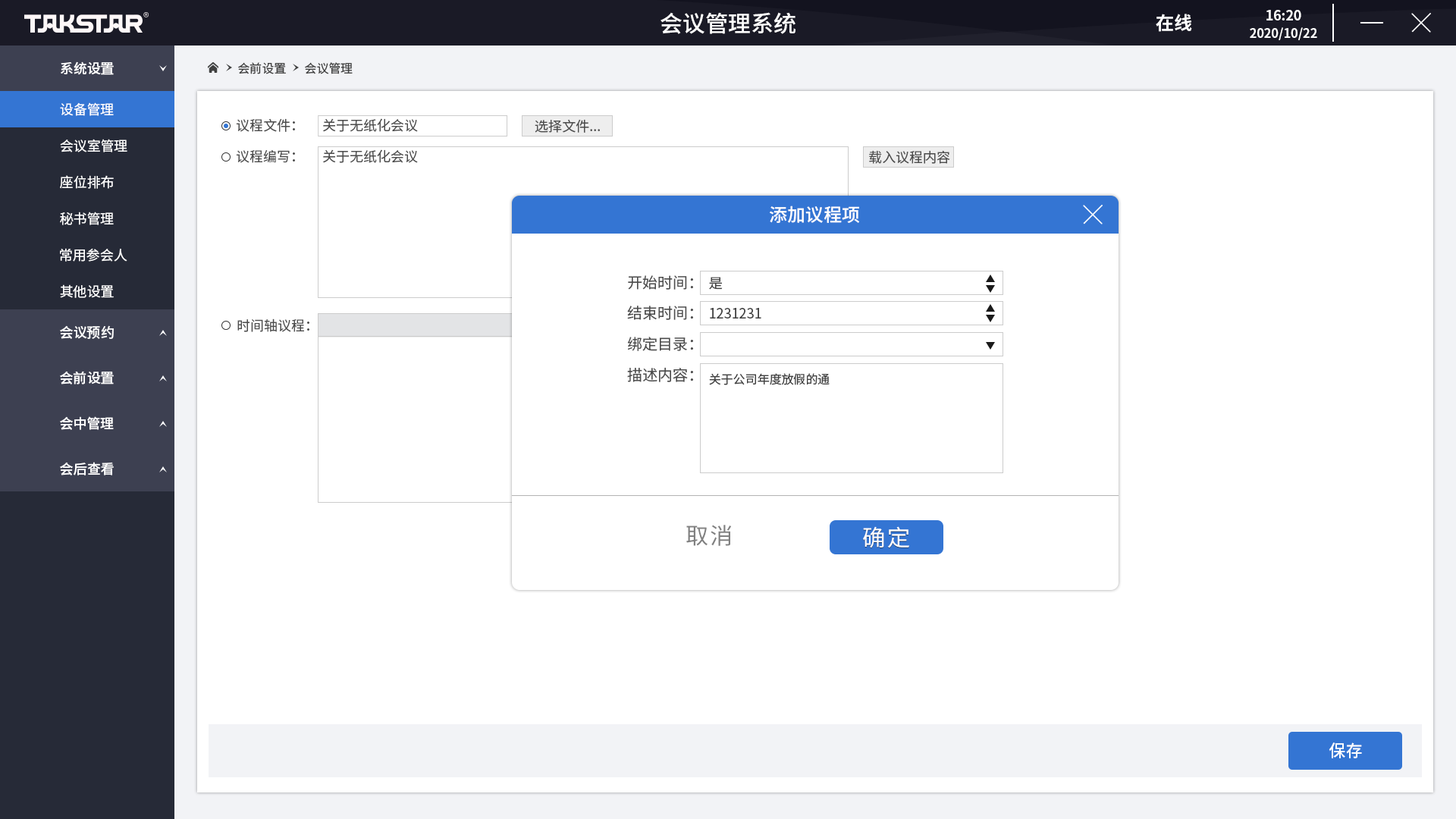
<style>
.page{position:relative;width:1456px;height:819px;background:#ffffff}
.page>*{position:absolute;margin:0}
.t1{font:22.7px "SourceHanSansCN-Medium";color:#ffffff}
.t2{font:18.2px "SourceHanSansCN-Bold";color:#ffffff}
.t3{font:12.6px/17.2px "SourceHanSansCN-Bold";letter-spacing:-0.01em;color:#fefefe}
.t4{font:13.8px/17.2px "SourceHanSansCN-Bold";letter-spacing:-0.01em;color:#fefefe}
.t5{font:13.6px "SourceHanSansCN-Medium";color:#ffffff}
.t6{font:12.1px "SourceHanSansCN-Regular";color:#404040}
.t7{font:13.6px "SourceHanSansCN-Regular";color:#ffffff}
.t8{font:13.6px "SourceHanSansCN-Regular";color:#4d4d4d}
.t9{font:18.2px "SourceHanSansCN-Medium";color:#ffffff}
.t10{font:15.2px "SourceHanSansCN-Regular";color:#4d4d4d}
.t11{font:13.6px "SourceHanSansCN-Regular";color:#404040}
.t12{font:22.7px "SourceHanSansCN-Regular";letter-spacing:0.075em;color:#808080}
.t13{font:22.7px "SourceHanSansCN-Regular";letter-spacing:0.075em;color:#ffffff}
.t14{font:16.7px "SourceHanSansCN-Medium";color:#ffffff}
</style>
<div class="page">
<p class="t1" style="left:660px;top:12px;width:135px;height:22px">会议管理系统</p>
<p class="t2" style="left:1156px;top:14px;width:36px;height:18px">在线</p>
<p class="t3" style="left:1250px;top:10px;width:67px;height:30px;text-align:center"><span class="t4">16:20<br></span>2020/10/22</p>
<p class="t5" style="left:61px;top:61px;width:53px;height:14px">系统设置</p>
<p class="t6" style="left:238px;top:62px;width:48px;height:12px">会前设置</p>
<p class="t6" style="left:305px;top:62px;width:48px;height:12px">会议管理</p>
<p class="t7" style="left:60px;top:102px;width:54px;height:14px">设备管理</p>
<p class="t8" style="left:236px;top:118px;width:59px;height:14px">议程文件：</p>
<p class="t8" style="left:323px;top:118px;width:95px;height:14px">关于无纸化会议</p>
<p class="t8" style="left:535px;top:119px;width:65px;height:14px">选择文件...</p>
<p class="t7" style="left:60px;top:139px;width:67px;height:13px">会议室管理</p>
<p class="t8" style="left:236px;top:149px;width:59px;height:14px">议程编写：</p>
<p class="t8" style="left:323px;top:149px;width:95px;height:14px">关于无纸化会议</p>
<p class="t8" style="left:869px;top:150px;width:81px;height:14px">载入议程内容</p>
<p class="t7" style="left:60px;top:175px;width:54px;height:14px">座位排布</p>
<p class="t9" style="left:770px;top:206px;width:89px;height:17px">添加议程项</p>
<p class="t7" style="left:60px;top:212px;width:54px;height:13px">秘书管理</p>
<p class="t7" style="left:60px;top:248px;width:67px;height:14px">常用参会人</p>
<p class="t10" style="left:628px;top:275px;width:65px;height:15px">开始时间：</p>
<p class="t11" style="left:709px;top:277px;width:14px;height:13px">是</p>
<p class="t7" style="left:60px;top:284px;width:54px;height:14px">其他设置</p>
<p class="t10" style="left:627px;top:306px;width:66px;height:14px">结束时间：</p>
<p class="t11" style="left:710px;top:308px;width:51px;height:10px">1231231</p>
<p class="t5" style="left:60px;top:325px;width:54px;height:14px">会议预约</p>
<p class="t8" style="left:237px;top:318px;width:72px;height:14px">时间轴议程：</p>
<p class="t10" style="left:627px;top:337px;width:66px;height:14px">绑定目录：</p>
<p class="t5" style="left:60px;top:371px;width:54px;height:13px">会前设置</p>
<p class="t10" style="left:627px;top:367px;width:66px;height:15px">描述内容：</p>
<p class="t6" style="left:709px;top:373px;width:121px;height:12px">关于公司年度放假的通</p>
<p class="t5" style="left:60px;top:416px;width:54px;height:14px">会中管理</p>
<p class="t5" style="left:60px;top:462px;width:54px;height:13px">会后查看</p>
<p class="t12" style="left:686px;top:525px;width:46px;height:21px">取消</p>
<p class="t13" style="left:863px;top:526px;width:46px;height:22px">确定</p>
<p class="t14" style="left:1329px;top:742px;width:33px;height:16px">保存</p>
</div>
